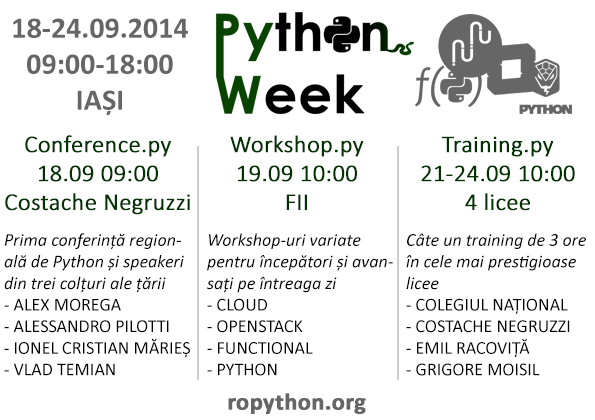
<style>
.page{position:relative;width:595px;height:420px;background:#ffffff}
.page>*{position:absolute;margin:0}
.t1{font:30px "Calibri-Bold";color:#666666}
.t2{font:24px "Calibri-Light";color:#003300;font-weight:bold}
.t3{font:18px "Calibri-Italic";color:#000000}
.t4{font:18px "Calibri";color:#000000}
.t5{font:24px "Calibri-Bold";color:#666666;font-weight:bold}
</style>
<div class="page">
<p class="t1" style="left:13px;top:18px;width:175px;height:97px;text-align:center">18-24.09.2014<br>09:00-18:00<br>IAȘI</p>
<p class="t2" style="left:5px;top:135px;width:185px;height:80px;text-align:center">Conference.py<br>18.09 09:00<br>Costache Negruzzi</p>
<p class="t2" style="left:230px;top:135px;width:134px;height:75px;text-align:center">Workshop.py<br>19.09 10:00<br>FII</p>
<p class="t2" style="left:421px;top:136px;width:154px;height:75px;text-align:center">Training.py<br>21-24.09 10:00<br>4 licee</p>
<p class="t3" style="left:4px;top:233px;width:186px;height:143px">Prima conferință regională de Python și speakeri din trei colțuri ale țării<br><span class="t4">- ALEX MOREGA<br>- ALESSANDRO PILOTTI<br>- IONEL CRISTIAN MĂRIEȘ<br>- VLAD TEMIAN</span></p>
<p class="t3" style="left:207px;top:233px;width:186px;height:143px">Workshop-uri variate pentru începători și avansați pe întreaga zi<br><span class="t4">- CLOUD<br>- OPENSTACK<br>- FUNCTIONAL<br>- PYTHON</span></p>
<p class="t4" style="left:406px;top:233px;width:180px;height:143px"><span class="t3">Câte un training de 3 ore în cele mai prestigioase licee<br></span>- COLEGIUL NAȚIONAL<br>- COSTACHE NEGRUZZI<br>- EMIL RACOVIȚĂ<br>- GRIGORE MOISIL</p>
<p class="t5" style="left:228px;top:393px;width:138px;height:21px">ropython.org</p>
</div>
